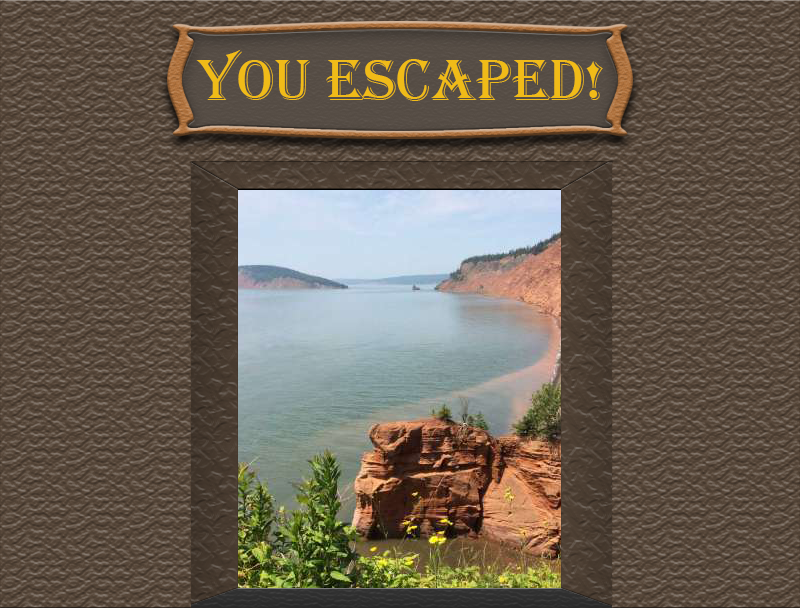
<style>
.page{position:relative;width:800px;height:608px}
.page>*{position:absolute;margin:0}
.t1{font:60px "Algerian";color:#f0bb18}
</style>
<div class="page">
<p class="t1" style="left:196px;top:49px;width:407px;height:52px">You Escaped!</p>
</div>
